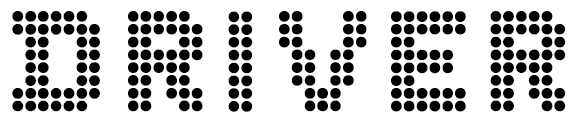
<style>
.page{position:relative;width:579px;height:120px;background:#ffffff}
.page>*{position:absolute;margin:0}
.t1{font:125px "CFDots-Regular";color:#000000;font-weight:bold}
</style>
<div class="page">
<p class="t1" style="left:12px;top:11px;width:554px;height:101px">DRIVER</p>
</div>
